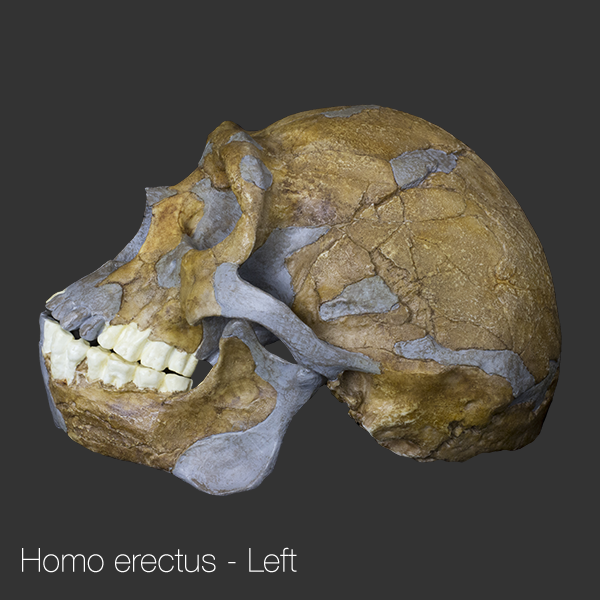
<style>
.page{position:relative;width:600px;height:600px;background:#333333}
.page>*{position:absolute;margin:0}
.t1{font:33.3px "HelveticaNeue-Thin";color:#ffffff}
</style>
<div class="page">
<p class="t1" style="left:22px;top:547px;width:275px;height:26px">Homo erectus - Left</p>
</div>
